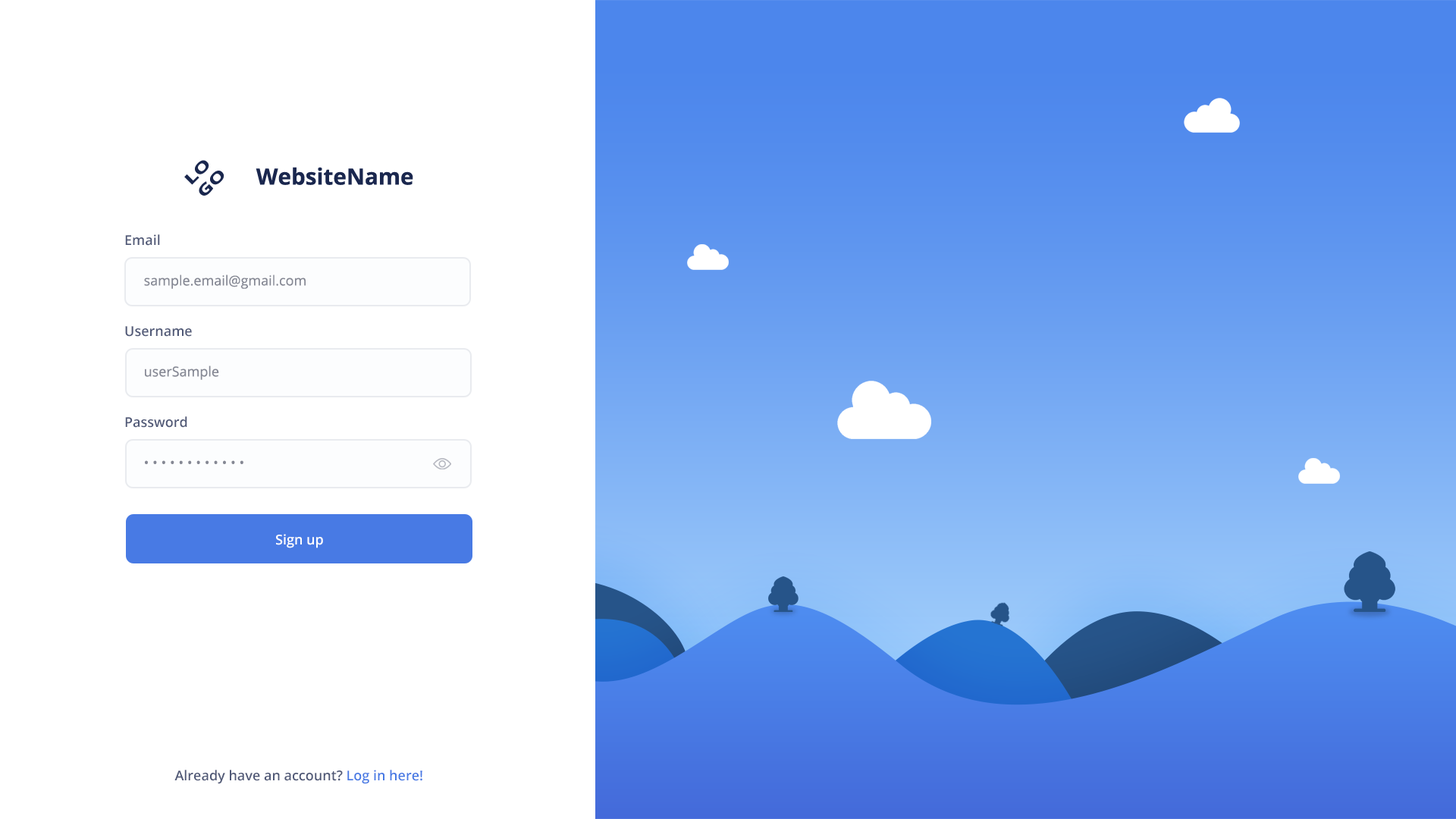
<style>
.page{position:relative;width:1456px;height:819px;background:#ffffff}
.page>*{position:absolute;margin:0}
.t1{font:15px "OpenSans-Bold";color:#1a274e;scale:1.45 1}
.t2{font:22.5px "OpenSans-Bold";color:#1a274e}
.t3{font:13.6px "OpenSans-Semibold";color:#505977}
.t4{font:13.6px "OpenSans";color:#858894}
.t5{font:13.6px "OpenSans-Semibold";color:#ffffff}
.t6{font:13.6px "OpenSans-Semibold";color:#487ae4}
</style>
<div class="page">
<p class="t1" style="left:184px;top:160px;width:40px;height:36px;rotate:-45deg">LO<br>GO</p>
<p class="t2" style="left:256px;top:167px;width:157px;height:18px">WebsiteName</p>
<p class="t3" style="left:125px;top:234px;width:35px;height:12px">Email</p>
<p class="t4" style="left:144px;top:275px;width:162px;height:14px">sample.email@gmail.com</p>
<p class="t3" style="left:125px;top:326px;width:67px;height:11px">Username</p>
<p class="t4" style="left:145px;top:366px;width:74px;height:14px">userSample</p>
<p class="t3" style="left:125px;top:416px;width:62px;height:12px">Password</p>
<p class="t4" style="left:145px;top:460px;width:98px;height:5px">• • • • • • • • • • • •</p>
<p class="t5" style="left:276px;top:534px;width:47px;height:14px">Sign up</p>
<p class="t3" style="left:174px;top:770px;width:248px;height:14px">Already have an account?<span class="t6"> Log in here!</span></p>
</div>
